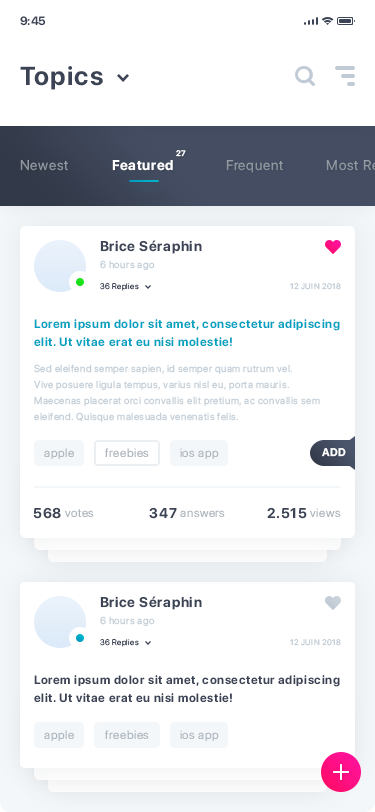
<style>
.page{position:relative;width:375px;height:812px;background:#ffffff}
.page>*{position:absolute;margin:0}
.t1{font:12px "SFProDisplay-Bold";color:#3b4355}
.t2{font:26px "SFProDisplay-Bold";letter-spacing:0.05em;color:#3b4355}
.t3{font:14px "SFProDisplay-Bold";letter-spacing:0.05em;color:#3b4355}
.t4{font:10px "SFProDisplay-Regular";letter-spacing:0.05em;color:#c5cfd9}
.t5{font:8px "SFProDisplay-Light";letter-spacing:0.05em;color:#3b4355}
.t6{font:8px "SFProDisplay-Regular";letter-spacing:0.05em;color:#c5cfd9}
.t7{font:12px/18px "SFProDisplay-Bold";letter-spacing:0.05em;color:#00a1c1}
.t8{font:10px/16px "SFProDisplay-Regular";letter-spacing:0.05em;color:#c5cfd9}
.t9{font:12px "SFProDisplay-Light";letter-spacing:0.05em;color:#adb6bf}
.t10{font:11px "SFProDisplay-Bold";letter-spacing:0.05em;color:#ffffff}
.t11{font:12px/18px "SFProDisplay-Bold";letter-spacing:0.05em;color:#3b4355}
</style>
<div class="page">
<p class="t1" style="left:20px;top:16px;width:25px;height:10px">9:45</p>
<p class="t2" style="left:20px;top:66px;width:83px;height:24px">Topics</p>
<p class="t3" style="left:100px;top:240px;width:102px;height:14px">Brice Séraphin</p>
<p class="t4" style="left:100px;top:260px;width:55px;height:10px">6 hours ago</p>
<p class="t5" style="left:100px;top:283px;width:39px;height:8px">36 Replies</p>
<p class="t6" style="left:290px;top:283px;width:51px;height:7px">12 JUIN 2018</p>
<p class="t7" style="left:34px;top:319px;width:306px;height:28px">Lorem ipsum dolor sit amet, consectetur adipiscing elit. Ut vitae erat eu nisi molestie!</p>
<p class="t8" style="left:34px;top:364px;width:286px;height:58px">Sed eleifend semper sapien, id semper quam rutrum vel.<br>Vive posuere ligula tempus, varius nisl eu, porta mauris.<br>Maecenas placerat orci convallis elit pretium, ac convallis sem eleifend. Quisque malesuada venenatis felis.</p>
<p class="t9" style="left:44px;top:448px;width:30px;height:11px">apple</p>
<p class="t9" style="left:105px;top:448px;width:44px;height:9px">freebies</p>
<p class="t9" style="left:180px;top:448px;width:39px;height:11px">ios app</p>
<p class="t10" style="left:322px;top:448px;width:24px;height:9px">ADD</p>
<p class="t9" style="left:33px;top:507px;width:61px;height:12px"><span class="t3">568 </span>votes</p>
<p class="t9" style="left:149px;top:507px;width:76px;height:12px"><span class="t3">347 </span>answers</p>
<p class="t3" style="left:267px;top:507px;width:74px;height:12px">2.515 <span class="t9">views</span></p>
<p class="t3" style="left:100px;top:596px;width:102px;height:14px">Brice Séraphin</p>
<p class="t4" style="left:100px;top:616px;width:55px;height:10px">6 hours ago</p>
<p class="t5" style="left:100px;top:639px;width:39px;height:8px">36 Replies</p>
<p class="t6" style="left:290px;top:639px;width:51px;height:7px">12 JUIN 2018</p>
<p class="t11" style="left:34px;top:675px;width:306px;height:28px">Lorem ipsum dolor sit amet, consectetur adipiscing elit. Ut vitae erat eu nisi molestie!</p>
<p class="t9" style="left:44px;top:730px;width:30px;height:11px">apple</p>
<p class="t9" style="left:105px;top:730px;width:44px;height:9px">freebies</p>
<p class="t9" style="left:180px;top:730px;width:39px;height:11px">ios app</p>
</div>
